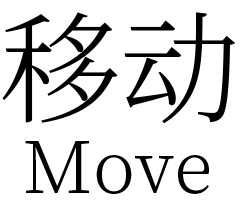
<style>
.page{position:relative;width:240px;height:200px;background:#ffffff}
.page>*{position:absolute;margin:0}
.t1{font:120px "SourceHanSerifCN-Light";color:#000000}
.t2{font:72px "SourceHanSerifCN-Light";color:#000000}
</style>
<div class="page">
<p class="t1" style="left:2px;top:12px;width:233px;height:112px">移动</p>
<p class="t2" style="left:25px;top:141px;width:184px;height:53px">Move</p>
</div>
